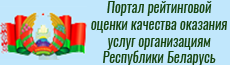
<style>
.page{position:relative;width:230px;height:65px;background:#c1e7fc}
.page>*{position:absolute;margin:0}
.t1{font:14px "Oswald-RegularItalic";color:#17440f}
</style>
<div class="page">
<p class="t1" style="left:91px;top:1px;width:136px;height:65px;text-align:center">Портал рейтинговой<br>оценки качества оказания<br>услуг организациям<br>Республики Беларусь</p>
</div>
